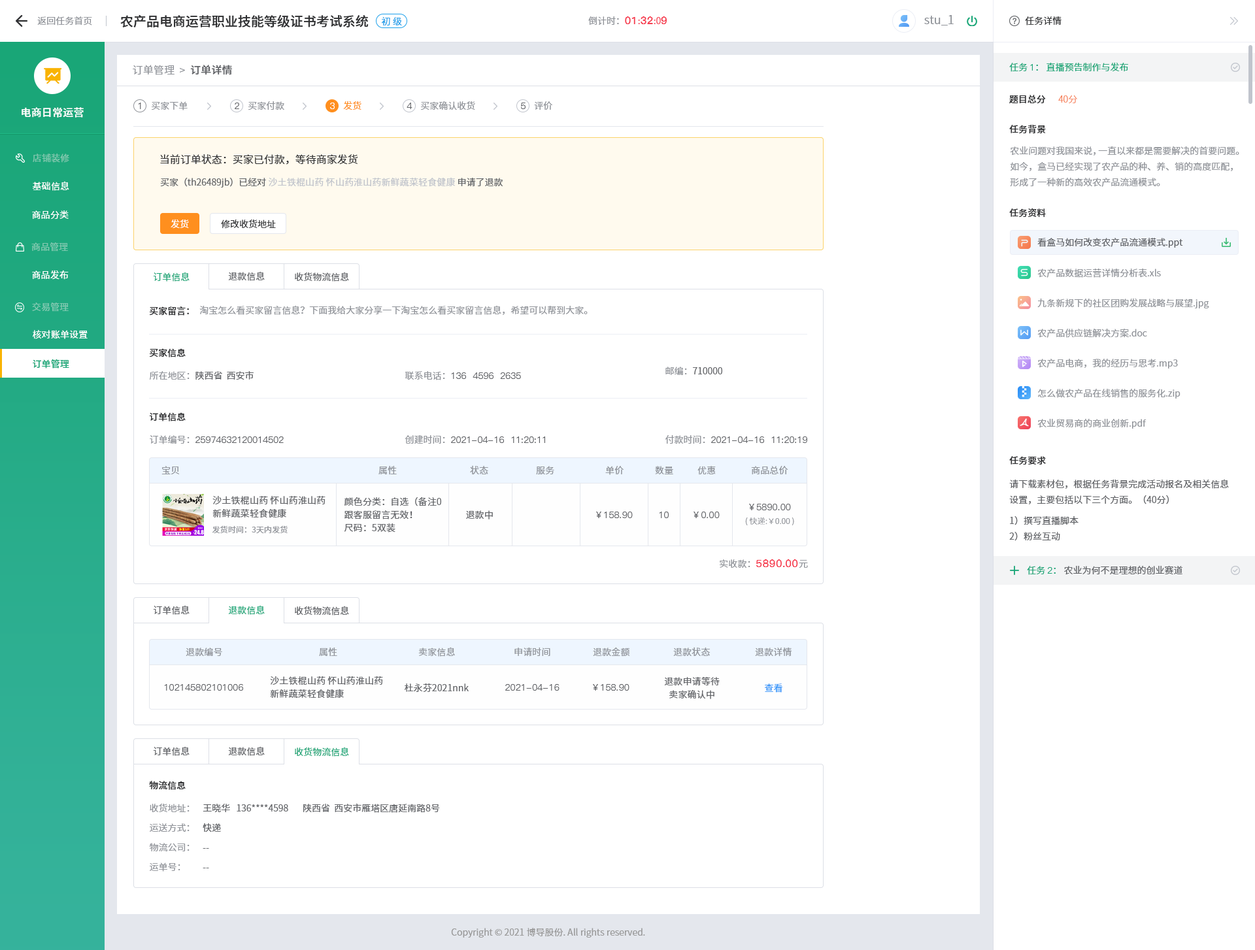
<style>
.page{position:relative;width:1255px;height:950px;background:#ffffff}
.page>*{position:absolute;margin:0}
.t1{font:9.1px "SourceHanSansCN-Normal";color:#909399}
.t2{font:13.1px "SourceHanSansCN-Medium";color:#303133}
.t3{font:9.1px "SourceHanSansCN-Normal";color:#1da0ea}
.t4{font:10.5px "PingFang-SC-Heavy";color:#f63f52}
.t5{font:9.1px "SourceHanSansCN-Normal";color:#f63f52}
.t6{font:11.8px "SourceHanSansCN-Normal";color:#909399}
.t7{font:9.1px "SourceHanSansCN-Normal";color:#303133}
.t8{font:10.5px "SourceHanSansCN-Normal";letter-spacing:0.01em;color:#909399}
.t9{font:10.5px "SourceHanSansCN-Medium";letter-spacing:0.01em;color:#606266}
.t10{font:9.1px "SourceHanSansCN-Normal";color:#19a677}
.t11{font:9.1px "PingFang-SC-Medium";color:#19a677}
.t12{font:9.1px "SourceHanSansCN-Normal";color:#ff8f1e}
.t13{font:9.1px "SourceHanSansCN-Medium";color:#303133}
.t14{font:9.1px "SourceHanSansCN-Light";color:#f67d53}
.t15{font:10.5px "SourceHanSansCN-Medium";letter-spacing:0.01em;color:#ffffff}
.t16{font:9.1px "PingFang-SC-Medium";color:#606266}
.t17{font:9.1px "PingFang-SC-Medium";color:#ffffff}
.t18{font:9.1px/15.7px "SourceHanSansCN-Normal";color:#909399}
.t19{font:9.1px "SourceHanSansCN-Regular";letter-spacing:0.01em;color:#80c8af}
.t20{font:10.5px "SourceHanSansCN-Normal";color:#303133}
.t21{font:9.1px "SourceHanSansCN-Normal";letter-spacing:0.01em;color:#ffffff}
.t22{font:9.1px "SourceHanSansCN-Normal";letter-spacing:0.01em;color:#c0c4cc}
.t23{font:9.1px "SourceHanSansCN-Normal";color:#606266}
.t24{font:9.1px "SourceHanSansCN-Normal";color:#ffffff}
.t25{font:9.1px "SourceHanSansCN-Regular";letter-spacing:0.01em;color:#81c9b1}
.t26{font:9.1px "SourceHanSansCN-Regular";letter-spacing:0.01em;color:#ffffff}
.t27{font:9.1px "SourceHanSansSC-Normal";color:#1aa678}
.t28{font:9.1px "SourceHanSansSC-Normal";color:#606266}
.t29{font:9.1px "SourceHanSansCN-Regular";letter-spacing:0.01em;color:#82cab2}
.t30{font:9.1px "SourceHanSansSC-Normal";color:#909399}
.t31{font:9.1px "SourceHanSansSC-Medium";color:#303133}
.t32{font:9.1px "SourceHanSansCN-Medium";letter-spacing:0.01em;color:#19a677}
.t33{font:9.1px "SourceHanSansCN-Normal";letter-spacing:0.01em;color:#909399}
.t34{font:9.1px/15.7px "SourceHanSansCN-Normal";color:#606266}
.t35{font:9.1px/13.1px "SourceHanSansCN-Normal";letter-spacing:0.01em;color:#606266}
.t36{font:9.1px "PingFang-SC-Medium";letter-spacing:0.01em;color:#606266}
.t37{font:9.1px "SourceHanSansCN-Normal";letter-spacing:0.01em;color:#606266}
.t38{font:7.8px "SourceHanSansCN-Light";letter-spacing:0.01em;color:#909399}
.t39{font:7.8px "SourceHanSansCN-Normal";letter-spacing:0.01em;color:#909399}
.t40{font:10.5px "PingFang-SC-Bold";letter-spacing:0.01em;color:#f63f52}
.t41{font:9.1px "PingFang-SC-Medium";color:#1aa678}
.t42{font:9.1px "SourceHanSansCN-Normal";color:#1aa678}
.t43{font:9.1px "SourceHanSansSC-Normal";color:#19a677}
.t44{font:9.1px "SourceHanSansCN-Normal";letter-spacing:0.01em;color:#3395fa}
.t45{font:9.1px/19.6px "SourceHanSansSC-Normal";color:#909399}
.t46{font:9.1px/19.6px "SourceHanSansSC-Normal";color:#606266}
.t47{font:9.1px "SourceHanSansCN-Normal";color:#999999}
</style>
<div class="page">
<p class="t1" style="left:37px;top:16px;width:55px;height:9px">返回任务首页</p>
<p class="t2" style="left:120px;top:14px;width:249px;height:13px">农产品电商运营职业技能等级证书考试系统</p>
<p class="t3" style="left:381px;top:17px;width:21px;height:9px">初 级</p>
<p class="t1" style="left:588px;top:16px;width:79px;height:9px">倒计时：<span class="t4">01</span><span class="t5">:</span><span class="t4">32</span><span class="t5">:0</span><span class="t4">9</span></p>
<p class="t6" style="left:924px;top:15px;width:30px;height:10px">stu_1</p>
<p class="t7" style="left:1025px;top:16px;width:36px;height:9px">任务详情</p>
<p class="t8" style="left:133px;top:65px;width:99px;height:10px">订单管理  &gt;<span class="t9">  订单详情</span></p>
<p class="t10" style="left:1009px;top:62px;width:119px;height:10px">任务 <span class="t11">1</span>： 直播预告制作与发布</p>
<p class="t1" style="left:151px;top:101px;width:37px;height:9px">买家下单</p>
<p class="t1" style="left:248px;top:101px;width:36px;height:9px">买家付款</p>
<p class="t12" style="left:343px;top:101px;width:18px;height:9px">发货</p>
<p class="t1" style="left:420px;top:101px;width:55px;height:9px">买家确认收货</p>
<p class="t1" style="left:534px;top:101px;width:18px;height:9px">评价</p>
<p class="t13" style="left:1009px;top:95px;width:37px;height:9px">题目总分</p>
<p class="t14" style="left:1058px;top:95px;width:19px;height:8px">40分</p>
<p class="t15" style="left:22px;top:107px;width:62px;height:11px">电商日常运营</p>
<p class="t16" style="left:138px;top:103px;width:3px;height:6px">1</p>
<p class="t16" style="left:235px;top:103px;width:4px;height:6px">2</p>
<p class="t17" style="left:330px;top:103px;width:5px;height:6px">3</p>
<p class="t16" style="left:407px;top:103px;width:5px;height:6px">4</p>
<p class="t16" style="left:521px;top:103px;width:4px;height:6px">5</p>
<p class="t13" style="left:1009px;top:124px;width:37px;height:10px">任务背景</p>
<p class="t18" style="left:1010px;top:146px;width:229px;height:41px">农业问题对我国来说，一直以来都是需要解决的首要问题。如今，盒马已经实现了农产品的种、养、销的高度匹配，形成了一种新的高效农产品流通模式。</p>
<p class="t19" style="left:33px;top:154px;width:36px;height:9px">店铺装修</p>
<p class="t20" style="left:160px;top:154px;width:197px;height:11px">当前订单状态：买家已付款，等待商家发货</p>
<p class="t21" style="left:33px;top:181px;width:36px;height:10px">基础信息</p>
<p class="t22" style="left:160px;top:177px;width:343px;height:11px"><span class="t23">买家（th26489jb）已经对 </span>沙土铁棍山药 怀山药淮山药新鲜蔬菜轻食健康<span class="t23"> 申请了退款</span></p>
<p class="t13" style="left:1009px;top:208px;width:37px;height:10px">任务资料</p>
<p class="t21" style="left:32px;top:210px;width:37px;height:9px">商品分类</p>
<p class="t24" style="left:171px;top:219px;width:18px;height:9px">发货</p>
<p class="t7" style="left:221px;top:220px;width:55px;height:9px">修改收货地址</p>
<p class="t25" style="left:31px;top:242px;width:37px;height:10px">商品管理</p>
<p class="t23" style="left:1037px;top:238px;width:146px;height:10px">看盒马如何改变农产品流通模式.ppt</p>
<p class="t26" style="left:32px;top:270px;width:37px;height:10px">商品发布</p>
<p class="t1" style="left:1037px;top:269px;width:124px;height:9px">农产品数据运营详情分析表.xls</p>
<p class="t27" style="left:153px;top:272px;width:37px;height:10px">订单信息</p>
<p class="t28" style="left:228px;top:271px;width:37px;height:10px">退款信息</p>
<p class="t28" style="left:295px;top:272px;width:54px;height:10px">收货物流信息</p>
<p class="t29" style="left:32px;top:303px;width:37px;height:9px">交易管理</p>
<p class="t30" style="left:199px;top:305px;width:389px;height:10px">淘宝怎么看买家留言信息？下面我给大家分享一下淘宝怎么看买家留言信息，希望可以帮到大家。</p>
<p class="t1" style="left:1037px;top:298px;width:172px;height:10px">九条新规下的社区团购发展战略与展望.jpg</p>
<p class="t31" style="left:149px;top:307px;width:40px;height:9px">买家留言：</p>
<p class="t1" style="left:1037px;top:329px;width:110px;height:9px">农产品供应链解决方案.doc</p>
<p class="t21" style="left:33px;top:330px;width:55px;height:9px">核对账单设置</p>
<p class="t31" style="left:149px;top:348px;width:37px;height:9px">买家信息</p>
<p class="t32" style="left:33px;top:359px;width:36px;height:10px">订单管理</p>
<p class="t1" style="left:1037px;top:359px;width:141px;height:10px">农产品电商，我的经历与思考.mp3</p>
<p class="t28" style="left:149px;top:371px;width:105px;height:9px"><span class="t30">所在地区：</span>陕西省  西安市</p>
<p class="t16" style="left:405px;top:371px;width:116px;height:9px"><span class="t30">联系电话：</span>136  4596  2635</p>
<p class="t28" style="left:665px;top:367px;width:57px;height:8px"><span class="t30">邮编：</span>710000</p>
<p class="t1" style="left:1038px;top:389px;width:142px;height:10px">怎么做农产品在线销售的服务化.zip</p>
<p class="t31" style="left:149px;top:412px;width:37px;height:10px">订单信息</p>
<p class="t1" style="left:1037px;top:419px;width:109px;height:10px">农业贸易商的商业创新.pdf</p>
<p class="t16" style="left:150px;top:435px;width:134px;height:9px"><span class="t30">订单编号：</span>25974632120014502</p>
<p class="t16" style="left:405px;top:435px;width:140px;height:9px"><span class="t30">创建时间：</span>2021-04-16  11:20:11</p>
<p class="t16" style="left:665px;top:435px;width:142px;height:9px"><span class="t30">付款时间：</span>2021-04-16  11:20:19</p>
<p class="t13" style="left:1009px;top:456px;width:37px;height:9px">任务要求</p>
<p class="t33" style="left:161px;top:466px;width:19px;height:8px">宝贝</p>
<p class="t33" style="left:378px;top:466px;width:19px;height:9px">属性</p>
<p class="t33" style="left:470px;top:465px;width:18px;height:9px">状态</p>
<p class="t33" style="left:536px;top:466px;width:18px;height:8px">服务</p>
<p class="t33" style="left:605px;top:466px;width:18px;height:9px">单价</p>
<p class="t33" style="left:655px;top:466px;width:18px;height:8px">数量</p>
<p class="t33" style="left:697px;top:466px;width:19px;height:9px">优惠</p>
<p class="t33" style="left:751px;top:466px;width:37px;height:8px">商品总价</p>
<p class="t34" style="left:1009px;top:479px;width:220px;height:62px">请下载素材包，根据任务背景完成活动报名及相关信息设置，主要包括以下三个方面。（40分）<br>1）撰写直播脚本<br>2）粉丝互动</p>
<p class="t35" style="left:212px;top:496px;width:113px;height:22px">沙土铁棍山药 怀山药淮山药新鲜蔬菜轻食健康</p>
<p class="t35" style="left:344px;top:497px;width:97px;height:36px">颜色分类：自选（备注0<br>跟客服留言无效！<br>尺码：5双装</p>
<p class="t36" style="left:749px;top:504px;width:42px;height:6px">￥5890.00</p>
<p class="t37" style="left:466px;top:510px;width:27px;height:10px">退款中</p>
<p class="t36" style="left:596px;top:512px;width:37px;height:6px">￥158.90</p>
<p class="t36" style="left:659px;top:512px;width:10px;height:6px">10</p>
<p class="t36" style="left:693px;top:512px;width:27px;height:6px">￥0.00</p>
<p class="t38" style="left:745px;top:518px;width:49px;height:7px">( 快递:￥0.00 )</p>
<p class="t39" style="left:212px;top:525px;width:76px;height:9px">发货时间：3天内发货</p>
<p class="t40" style="left:720px;top:559px;width:88px;height:9px"><span class="t33">实收款：</span>5890.00<span class="t33">元</span></p>
<p class="t23" style="left:1027px;top:566px;width:155px;height:9px"><span class="t10">任务 </span><span class="t41">2</span><span class="t42">：</span> 农业为何不是理想的创业赛道</p>
<p class="t28" style="left:153px;top:605px;width:37px;height:10px">订单信息</p>
<p class="t43" style="left:228px;top:605px;width:37px;height:10px">退款信息</p>
<p class="t28" style="left:295px;top:606px;width:54px;height:10px">收货物流信息</p>
<p class="t33" style="left:186px;top:648px;width:36px;height:8px">退款编号</p>
<p class="t33" style="left:319px;top:648px;width:18px;height:9px">属性</p>
<p class="t33" style="left:418px;top:647px;width:37px;height:10px">卖家信息</p>
<p class="t33" style="left:514px;top:648px;width:36px;height:8px">申请时间</p>
<p class="t33" style="left:593px;top:647px;width:37px;height:10px">退款金额</p>
<p class="t33" style="left:673px;top:647px;width:37px;height:9px">退款状态</p>
<p class="t33" style="left:755px;top:648px;width:37px;height:9px">退款详情</p>
<p class="t35" style="left:270px;top:676px;width:113px;height:23px">沙土铁棍山药 怀山药淮山药新鲜蔬菜轻食健康</p>
<p class="t35" style="left:664px;top:677px;width:56px;height:22px;text-align:center">退款申请等待<br>卖家确认中</p>
<p class="t36" style="left:164px;top:684px;width:79px;height:7px">102145802101006</p>
<p class="t37" style="left:405px;top:684px;width:64px;height:8px">杜永芬2021nnk</p>
<p class="t36" style="left:505px;top:684px;width:54px;height:7px">2021-04-16</p>
<p class="t36" style="left:593px;top:684px;width:36px;height:7px">￥158.90</p>
<p class="t44" style="left:765px;top:684px;width:17px;height:9px">查看</p>
<p class="t28" style="left:153px;top:746px;width:37px;height:10px">订单信息</p>
<p class="t28" style="left:228px;top:746px;width:37px;height:10px">退款信息</p>
<p class="t43" style="left:295px;top:747px;width:54px;height:10px">收货物流信息</p>
<p class="t31" style="left:149px;top:781px;width:37px;height:9px">物流信息</p>
<p class="t45" style="left:149px;top:804px;width:41px;height:68px">收货地址：<br>运送方式：<br>物流公司：<br>运单号：</p>
<p class="t46" style="left:203px;top:803px;width:237px;height:66px">王晓华   136****4598       陕西省  西安市雁塔区唐延南路8号<br>快递<br>--<br>--</p>
<p class="t47" style="left:451px;top:928px;width:194px;height:10px">Copyright © 2021 博导股份. All rights reserved.</p>
</div>
